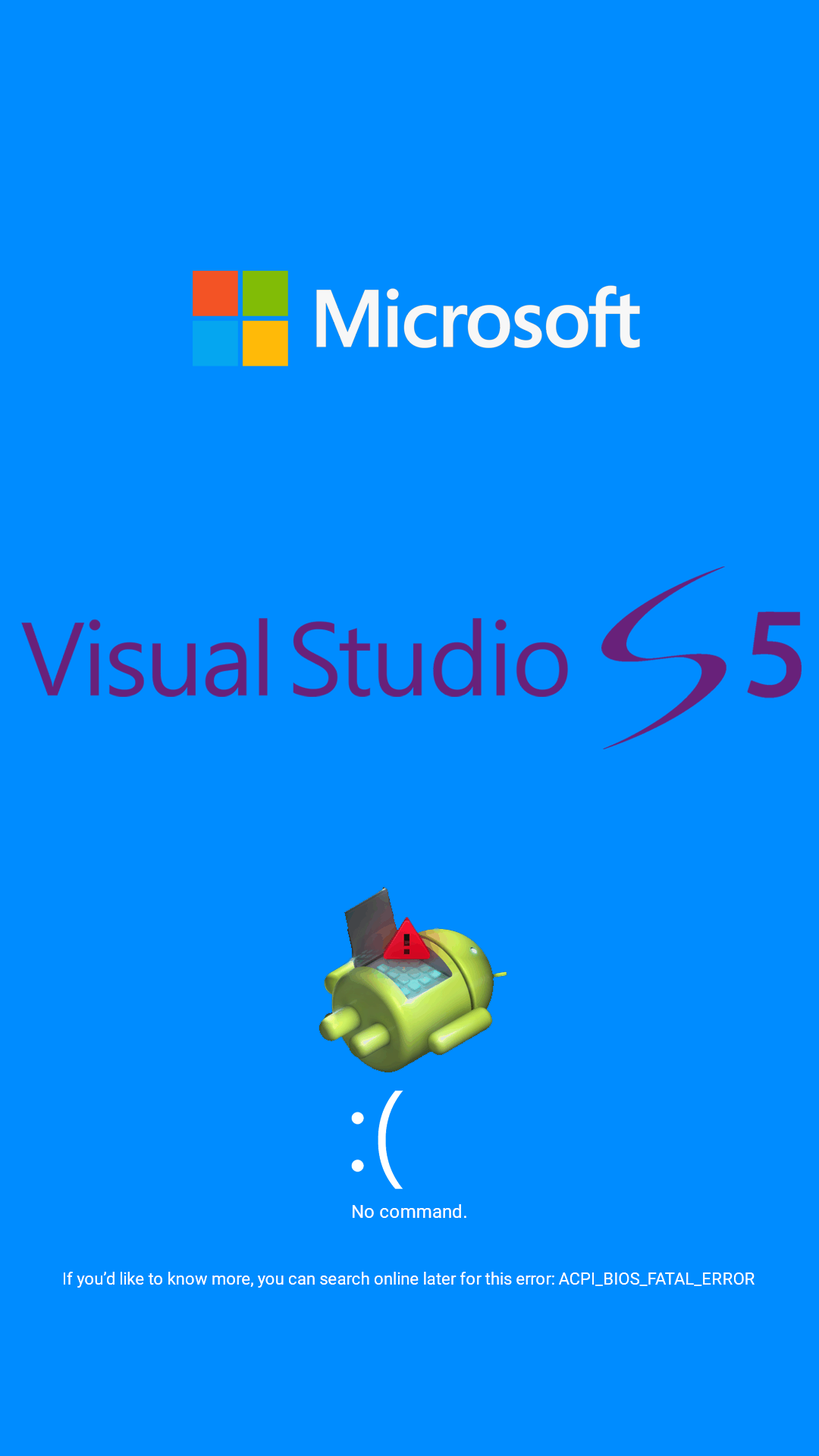
<style>
.page{position:relative;width:819px;height:1456px;background:#008cff}
.page>*{position:absolute;margin:0}
.t1{font:18.2px "Roboto-Regular";letter-spacing:0.005em;color:#ffffff}
.t2{font:16.7px "Roboto-Regular";letter-spacing:0.005em;color:#ffffff}
</style>
<div class="page">
<p class="t1" style="left:353px;top:1204px;width:113px;height:14px">No command.</p>
<p class="t2" style="left:64px;top:1272px;width:691px;height:16px">If you’d like to know more, you can search online later for this error: ACPI_BIOS_FATAL_ERROR</p>
</div>
